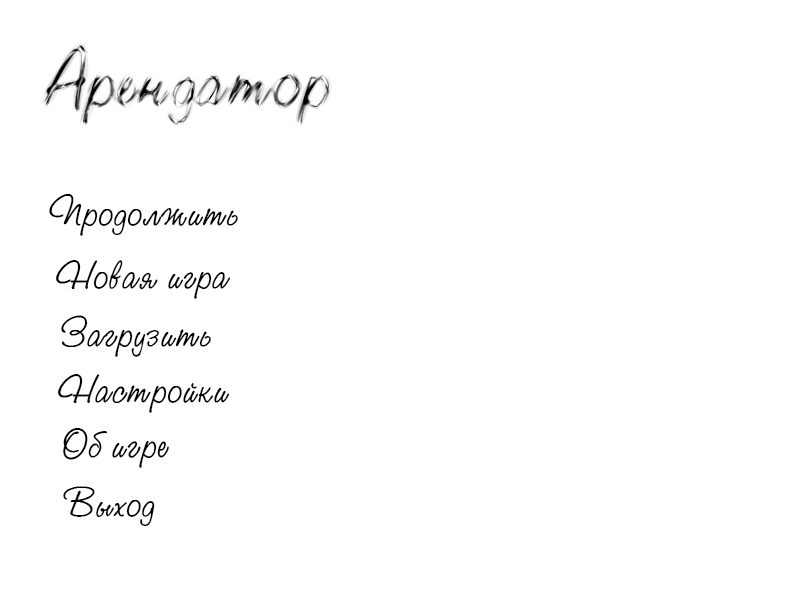
<style>
.page{position:relative;width:800px;height:600px;background:#ffffff}
.page>*{position:absolute;margin:0}
.t1{font:40px "StudioScriptC";color:#000000}
</style>
<div class="page">
<p class="t1" style="left:49px;top:194px;width:189px;height:42px">Продолжить</p>
<p class="t1" style="left:56px;top:260px;width:174px;height:39px">Новая игра</p>
<p class="t1" style="left:61px;top:315px;width:150px;height:42px">Загрузить</p>
<p class="t1" style="left:58px;top:374px;width:172px;height:39px">Настройки</p>
<p class="t1" style="left:63px;top:428px;width:106px;height:40px">Об игре</p>
<p class="t1" style="left:63px;top:486px;width:92px;height:41px">Выход</p>
</div>
